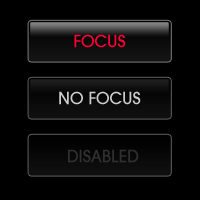
<style>
.page{position:relative;width:200px;height:200px;background:#000000}
.page>*{position:absolute;margin:0}
.t1{font:18px "AvantGardeMdITCTT";color:#ff0033}
.t2{font:18px "AvantGardeMdITCTT";color:#cdcdcd}
.t3{font:18px "AvantGardeMdITCTT";color:#303030}
</style>
<div class="page">
<p class="t1" style="left:74px;top:34px;width:52px;height:14px">FOCUS</p>
<p class="t2" style="left:59px;top:91px;width:82px;height:14px">NO FOCUS</p>
<p class="t3" style="left:68px;top:149px;width:71px;height:14px">DISABLED</p>
</div>
